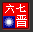
<style>
.page{position:relative;width:33px;height:32px;background:#f20000}
.page>*{position:absolute;margin:0}
.t1{font:10.4px "SimSun";color:#ffffff}
.t2{font:11.7px "SimSun";color:#ffffff}
</style>
<div class="page">
<p class="t1" style="left:5px;top:4px;width:21px;height:9px">六七</p>
<p class="t2" style="left:16px;top:15px;width:11px;height:12px">晋</p>
</div>
